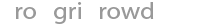
<style>
.page{position:relative;width:200px;height:25px;background:#ffffff}
.page>*{position:absolute;margin:0}
.t1{font:24px "MyriadHebrew-Regular";color:#999999;scale:1.11 1}
.t2{font:24px "MyriadHebrew-Regular";color:#ffffff;scale:1.11 1}
</style>
<div class="page">
<p class="t1" style="left:2px;top:2px;width:152px;height:22px"><span class="t2">P</span>ro<span class="t2">A</span>gri<span class="t2">C</span>rowd</p>
</div>
